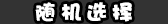
<style>
.page{position:relative;width:168px;height:24px;background:#333333}
.page>*{position:absolute;margin:0}
.t1{font:21.3px "DFPHaiBaoW12";letter-spacing:0.2em;color:#ffffff}
</style>
<div class="page">
<p class="t1" style="left:35px;top:2px;width:97px;height:20px">随机选择</p>
</div>
